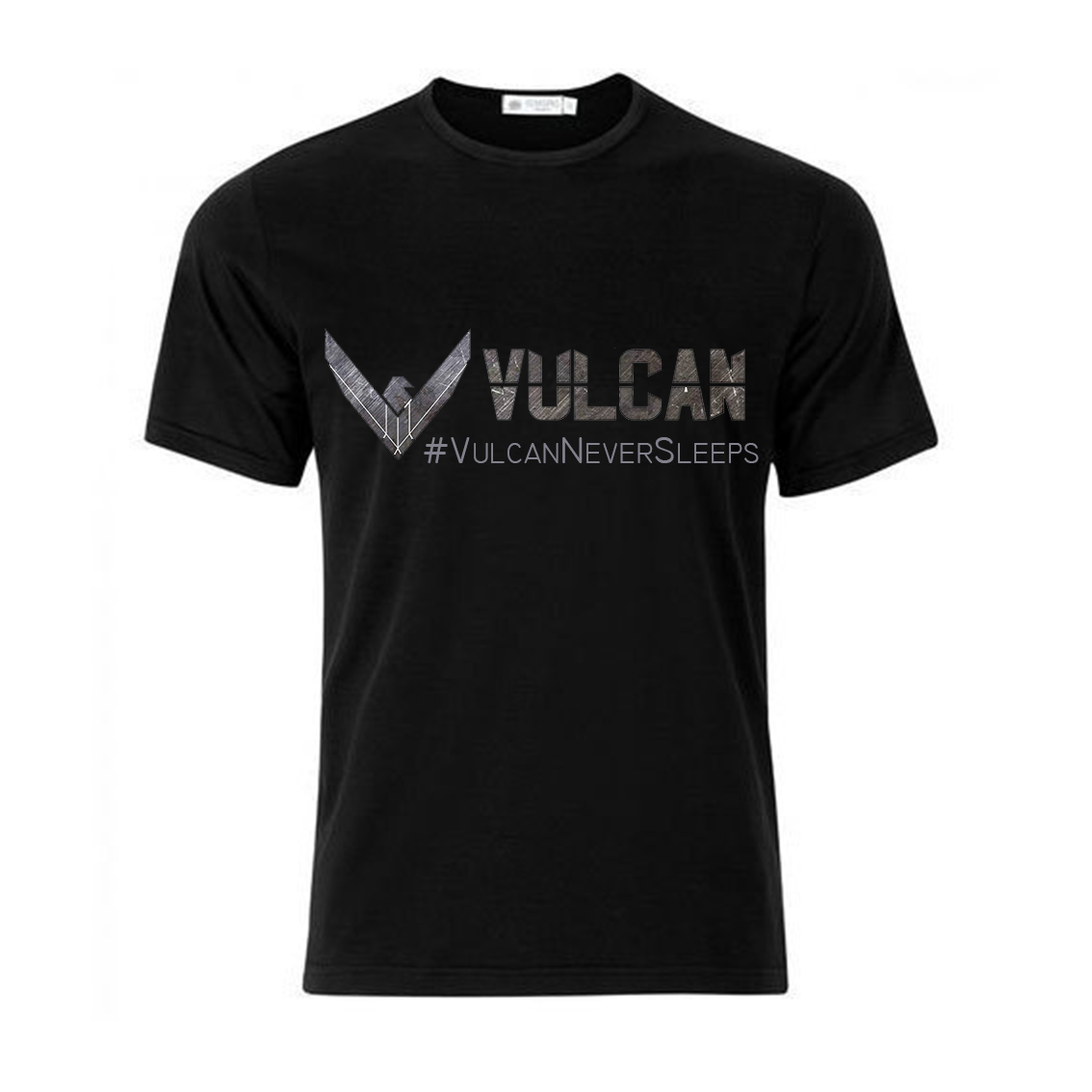
<style>
.page{position:relative;width:1092px;height:1092px;background:#ffffff}
.page>*{position:absolute;margin:0}
.t1{font:28.9px "Technic";color:#83818c;text-transform:uppercase}
.t2{font:38.5px "Technic";color:#83818c;text-transform:uppercase}
</style>
<div class="page">
<p class="t1" style="left:424px;top:437px;width:335px;height:26px"><span class="t2">#V</span>ulcan<span class="t2">N</span>ever<span class="t2">s</span>leeps</p>
</div>
